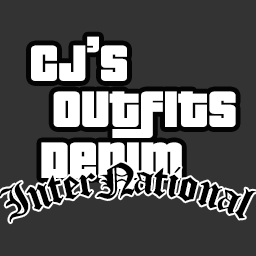
<style>
.page{position:relative;width:256px;height:256px;background:#333333}
.page>*{position:absolute;margin:0}
.t1{font:55.3px "PricedownBl-Regular";color:#ffffff}
.t2{font:55.3px/51px "PricedownBl-Regular";color:#ffffff}
.t3{font:42.8px "Diploma";color:#000000}
</style>
<div class="page">
<p class="t1" style="left:31px;top:36px;width:96px;height:45px">CJ’s</p>
<p class="t2" style="left:41px;top:91px;width:195px;height:98px">OUTFITS<br>Denim</p>
<p class="t3" style="left:0px;top:162px;width:256px;height:61px">InterNational</p>
</div>
